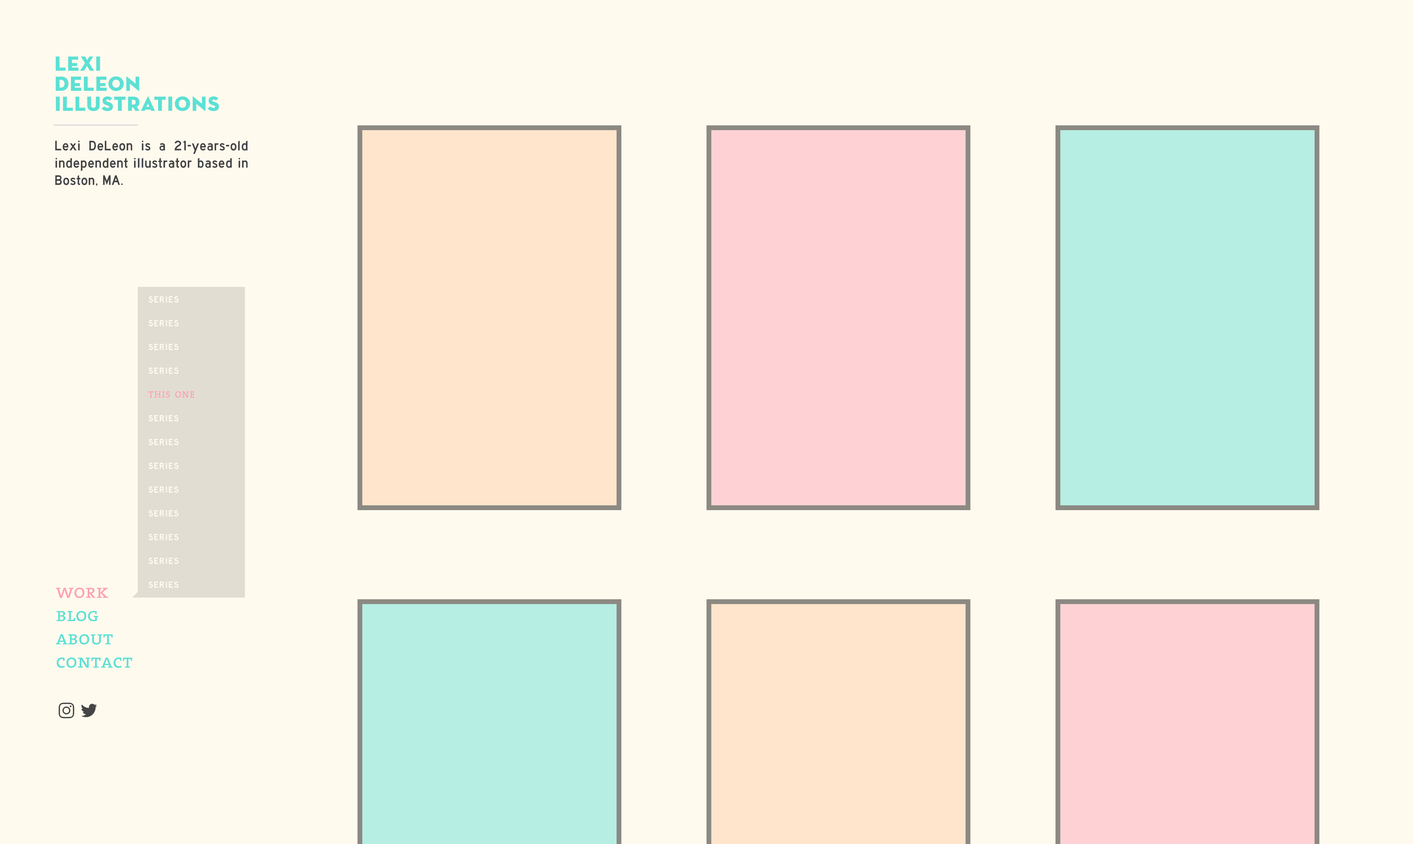
<style>
.page{position:relative;width:1413px;height:844px;background:#fffaee}
.page>*{position:absolute;margin:0}
.t1{font:20.9px/20px "NeutraDisp-Titling";letter-spacing:0.04em;color:#5de0d5}
.t2{font:14.4px "HighwayGothic";letter-spacing:0.02em;color:#444444}
.t3{font:13px "HighwayGothic";letter-spacing:0.06em;color:#fffaee;font-variant:small-caps;font-weight:bold}
.t4{font:13px "TheSerif-Caps";letter-spacing:0.06em;color:#fda2b4;font-variant:small-caps;font-weight:bold}
.t5{font:19.4px "TheSerif-Caps";color:#5de0d5}
.t6{font:19.4px "TheSerif-Caps";color:#fda2b4}
</style>
<div class="page">
<p class="t1" style="left:56px;top:56px;width:163px;height:55px">Lexi<br>DeLeon<br>Illustrations</p>
<p class="t2" style="left:55px;top:141px;width:193px;height:45px;text-align:justify">Lexi DeLeon is a 21-years-old independent illustrator based in Boston, MA.</p>
<p class="t3" style="left:149px;top:296px;width:29px;height:7px">series</p>
<p class="t3" style="left:149px;top:320px;width:29px;height:6px">series</p>
<p class="t3" style="left:149px;top:344px;width:29px;height:6px">series</p>
<p class="t3" style="left:149px;top:367px;width:29px;height:7px">series</p>
<p class="t4" style="left:149px;top:391px;width:45px;height:7px">this one</p>
<p class="t3" style="left:149px;top:415px;width:29px;height:6px">series</p>
<p class="t3" style="left:149px;top:439px;width:29px;height:6px">series</p>
<p class="t3" style="left:149px;top:462px;width:29px;height:7px">series</p>
<p class="t3" style="left:149px;top:486px;width:29px;height:7px">series</p>
<p class="t3" style="left:149px;top:510px;width:29px;height:7px">series</p>
<p class="t3" style="left:149px;top:534px;width:29px;height:6px">series</p>
<p class="t3" style="left:149px;top:558px;width:29px;height:6px">series</p>
<p class="t3" style="left:149px;top:581px;width:29px;height:7px">series</p>
<p class="t5" style="left:56px;top:588px;width:76px;height:80px;text-align:justify"><span class="t6">work<br></span>blog<br>about<br>contact</p>
</div>
